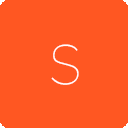
<style>
.page{position:relative;width:128px;height:128px;background:#ff5722}
.page>*{position:absolute;margin:0}
.t1{font:75px "Raleway-Thin";color:#ffffff;scale:0.92 1}
</style>
<div class="page">
<p class="t1" style="left:51px;top:44px;width:28px;height:41px">s</p>
</div>
